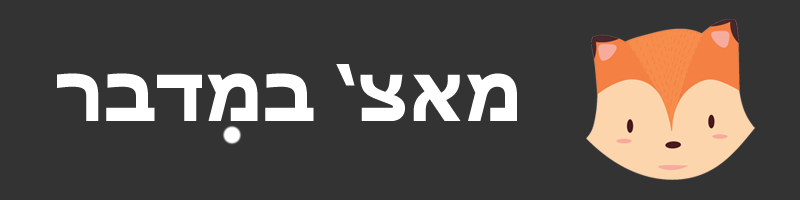
<style>
.page{position:relative;width:800px;height:200px;background:#333333}
.page>*{position:absolute;margin:0}
.t1{font:75px "Tahoma-Bold";color:#ffffff}
</style>
<div class="page">
<p class="t1" style="left:57px;top:64px;width:460px;height:57px">מאצ’ במדבר</p>
</div>
